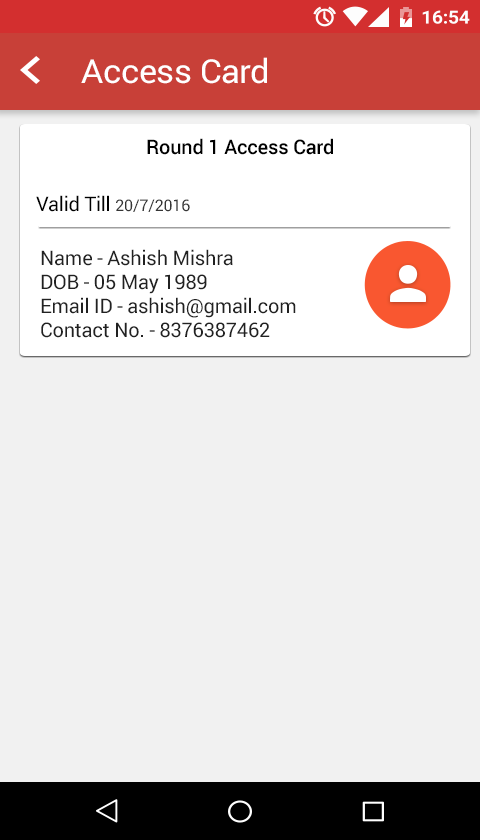
<style>
.page{position:relative;width:480px;height:840px;background:#f1f1f1}
.page>*{position:absolute;margin:0}
.t1{font:33.1px "Roboto-Regular";letter-spacing:-0.01em;color:#ffffff;scale:1.03 1}
.t2{font:20px "Roboto-Medium";letter-spacing:-0.01em;color:#000000}
.t3{font:20px "Roboto-Regular";letter-spacing:-0.01em;color:#000000}
.t4{font:16px "Roboto-Regular";letter-spacing:-0.01em;color:#353535}
.t5{font:20px "Roboto-Regular";letter-spacing:-0.01em;color:#212121}
</style>
<div class="page">
<p class="t1" style="left:81px;top:57px;width:186px;height:27px">Access Card</p>
<p class="t2" style="left:147px;top:138px;width:186px;height:17px">Round 1 Access Card</p>
<p class="t3" style="left:36px;top:195px;width:154px;height:17px">Valid Till <span class="t4">20/7/2016</span></p>
<p class="t5" style="left:41px;top:249px;width:255px;height:89px">Name - Ashish Mishra<br>DOB - 05 May 1989<br>Email ID - ashish@gmail.com<br>Contact No. - 8376387462</p>
</div>
